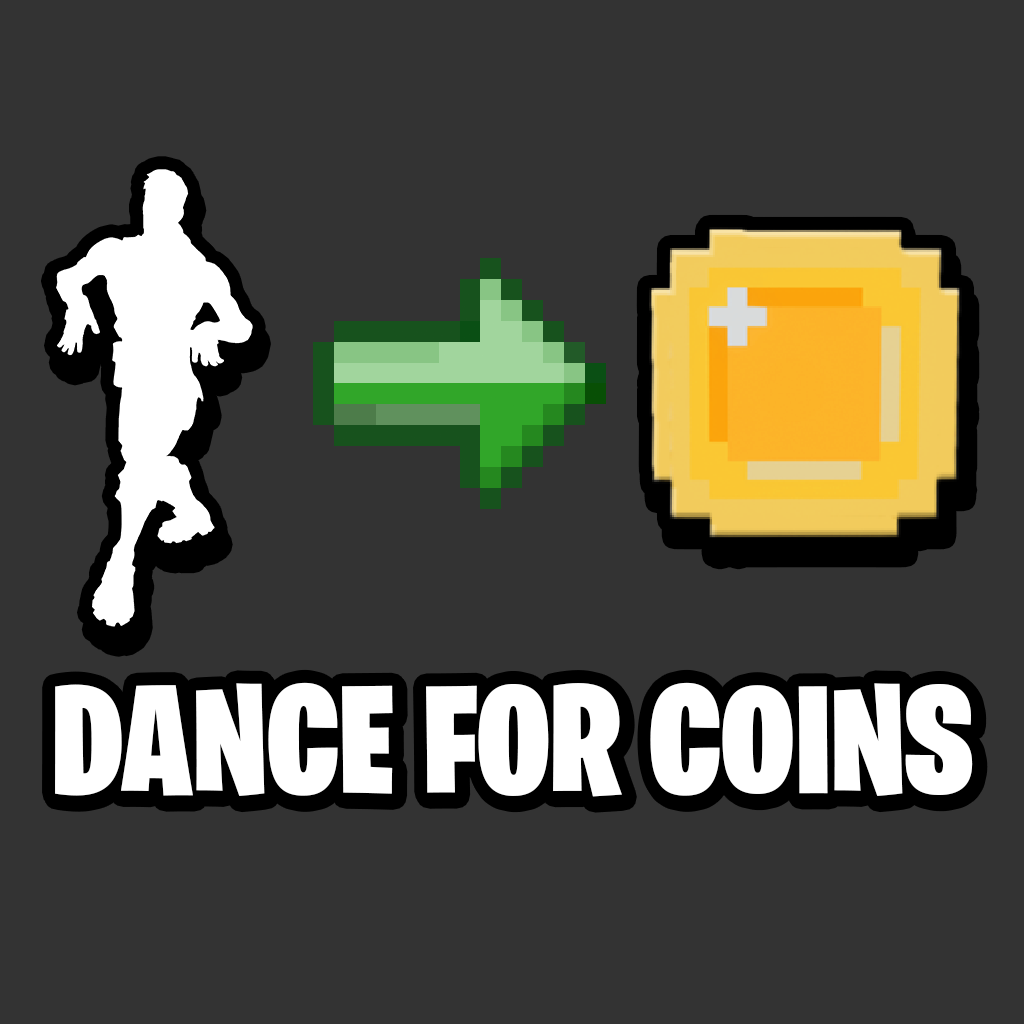
<style>
.page{position:relative;width:1024px;height:1024px;background:#333333}
.page>*{position:absolute;margin:0}
.t1{font:153.5px "BurbankBigCondensed-Black";color:#ffffff}
</style>
<div class="page">
<p class="t1" style="left:55px;top:682px;width:918px;height:115px">DANCE FOR COINS</p>
</div>
